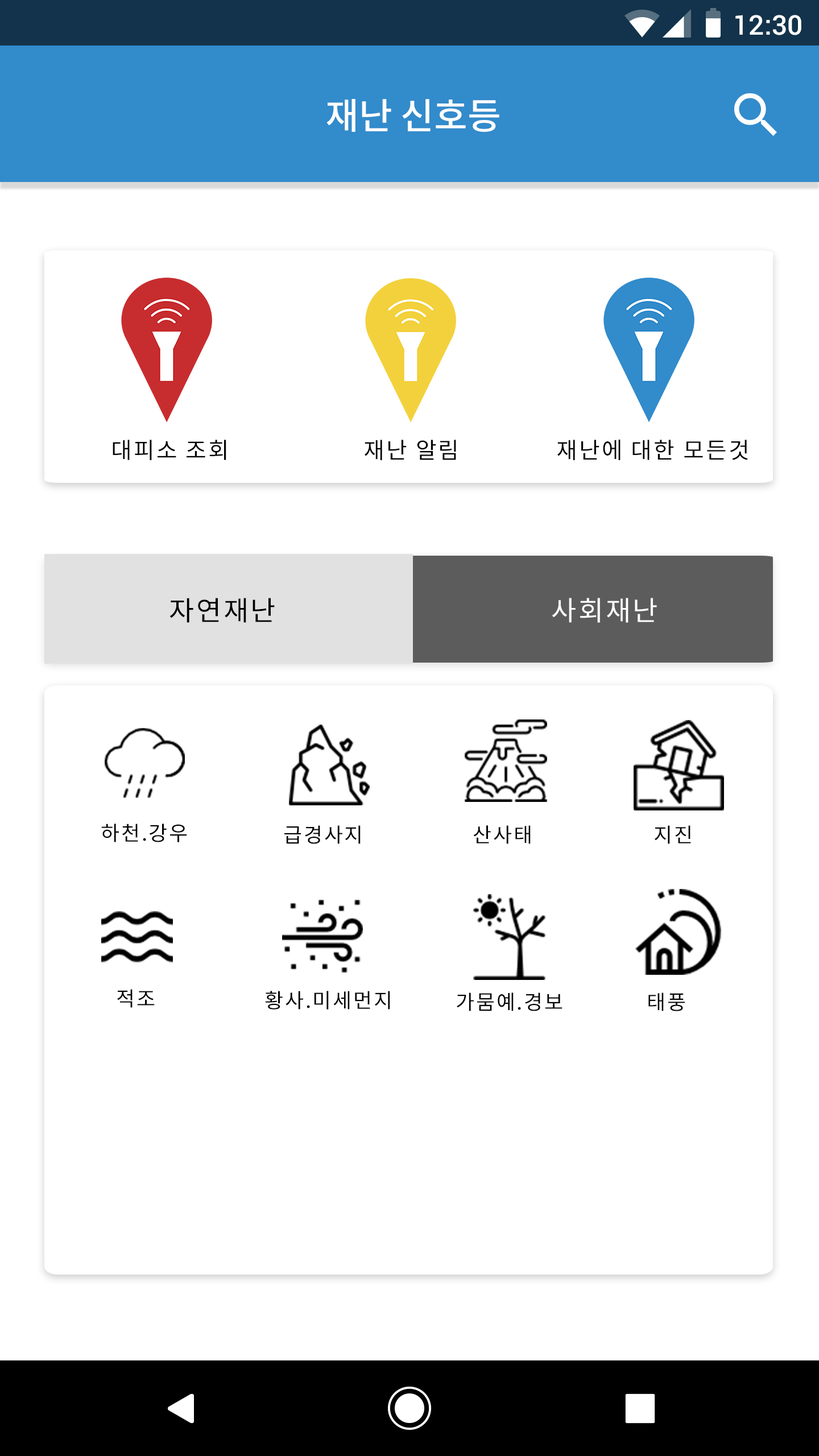
<style>
.page{position:relative;width:819px;height:1456px;background:#ffffff}
.page>*{position:absolute;margin:0}
.t1{font:27.3px "Roboto-Medium";color:#ffffff}
.t2{font:36.4px "NotoSansCJKkr-Medium";color:#ffffff}
.t3{font:22.7px "NotoSansCJKkr-Regular";letter-spacing:0.075em;color:#000000}
.t4{font:27.3px "NotoSansCJKkr-Regular";letter-spacing:0.075em;color:#000000}
.t5{font:27.3px "NotoSansCJKkr-Regular";letter-spacing:0.075em;color:#ffffff}
.t6{font:20.5px "NotoSansCJKkr-Regular";letter-spacing:0.075em;color:#000000}
</style>
<div class="page">
<p class="t1" style="left:735px;top:15px;width:66px;height:20px">12:30</p>
<p class="t2" style="left:326px;top:99px;width:173px;height:33px">재난 신호등</p>
<p class="t3" style="left:113px;top:440px;width:113px;height:20px">대피소 조회</p>
<p class="t3" style="left:365px;top:440px;width:91px;height:20px">재난 알림</p>
<p class="t3" style="left:557px;top:440px;width:191px;height:20px">재난에 대한 모든것</p>
<p class="t4" style="left:169px;top:598px;width:106px;height:25px">자연재난</p>
<p class="t5" style="left:552px;top:598px;width:105px;height:25px">사회재난</p>
<p class="t6" style="left:101px;top:824px;width:86px;height:18px">하천.강우</p>
<p class="t6" style="left:284px;top:825px;width:77px;height:19px">급경사지</p>
<p class="t6" style="left:473px;top:825px;width:58px;height:19px">산사태</p>
<p class="t6" style="left:655px;top:825px;width:36px;height:19px">지진</p>
<p class="t6" style="left:117px;top:989px;width:38px;height:19px">적조</p>
<p class="t6" style="left:265px;top:991px;width:125px;height:19px">황사.미세먼지</p>
<p class="t6" style="left:457px;top:992px;width:105px;height:19px">가뭄예.경보</p>
<p class="t6" style="left:648px;top:992px;width:37px;height:19px">태풍</p>
</div>
